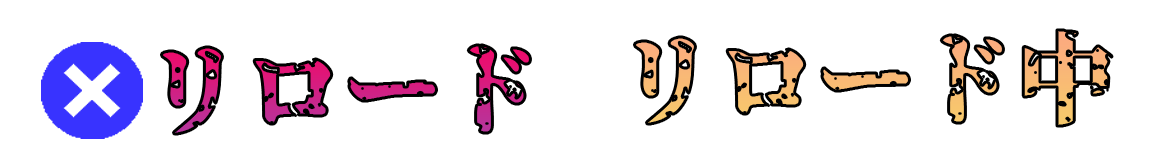
<style>
.page{position:relative;width:1160px;height:160px;background:#ffffff}
.page>*{position:absolute;margin:0}
.t1{font:100px "Genkaimincho"}
</style>
<div class="page">
<p class="t1" style="left:634px;top:30px;width:478px;height:96px">リロード中</p>
<p class="t1" style="left:161px;top:45px;width:370px;height:89px">リロード</p>
</div>
